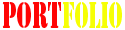
<style>
.page{position:relative;width:125px;height:30px;background:#ffffff}
.page>*{position:absolute;margin:0}
.t1{font:34.6px "StencilStd";color:#ff0505;scale:0.6 1}
.t2{font:33.7px "StencilStd";color:#f6ff05;scale:0.58 1}
</style>
<div class="page">
<p class="t1" style="left:2px;top:2px;width:59px;height:26px">Port</p>
<p class="t2" style="left:63px;top:2px;width:59px;height:26px">folio</p>
</div>
